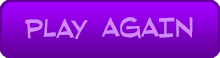
<style>
.page{position:relative;width:220px;height:58px}
.page>*{position:absolute;margin:0}
.t1{font:36px "RedStateBlueStateBB";color:#d189fb}
</style>
<div class="page">
<p class="t1" style="left:25px;top:17px;width:168px;height:22px">Play AGAIN</p>
</div>
